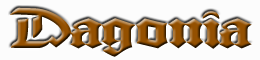
<style>
.page{position:relative;width:260px;height:60px;background:#fcfcfc}
.page>*{position:absolute;margin:0}
.t1{font:57px "FZ-GOTHIC3EX"}
</style>
<div class="page">
<p class="t1" style="left:10px;top:7px;width:242px;height:50px">Dagonia</p>
</div>
